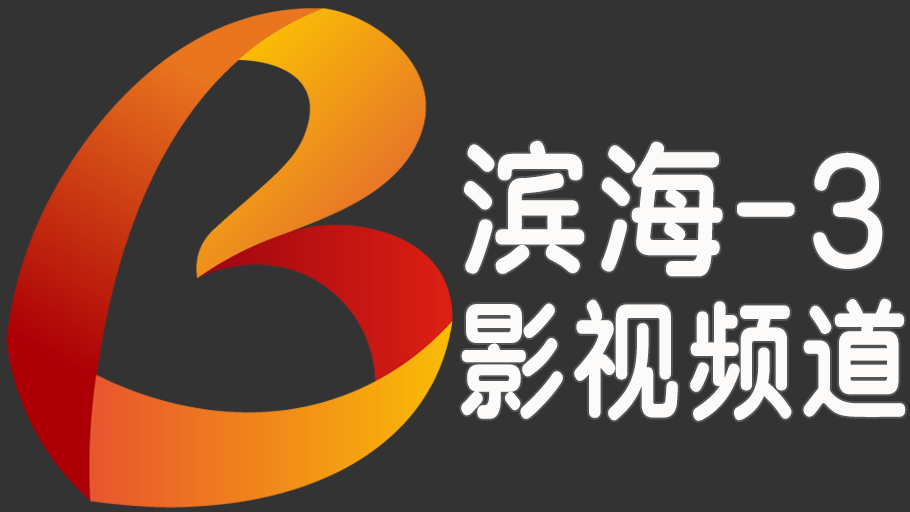
<style>
.page{position:relative;width:910px;height:512px;background:#333333}
.page>*{position:absolute;margin:0}
.t1{font:150px/160px "SJyuantijian-C-Regular";letter-spacing:0.02em;color:#fcfbf9;scale:0.9 1}
.t2{font:132px/160px "SJyuantijian-C-Regular";letter-spacing:0.02em;color:#fcfbf9;scale:0.85 1}
</style>
<div class="page">
<p class="t1" style="left:461px;top:140px;width:445px;height:281px">滨海-3<br><span class="t2">影视频道</span></p>
</div>
